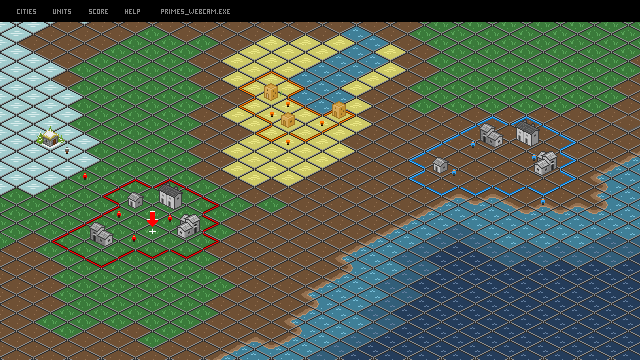
<style>
.page{position:relative;width:640px;height:360px;background:#6f5034}
.page>*{position:absolute;margin:0}
.t1{font:8px "PixelMillennium";color:#848484;text-transform:uppercase}
</style>
<div class="page">
<p class="t1" style="left:17px;top:9px;width:213px;height:6px">cities units score help primes_webcam.exe</p>
</div>
